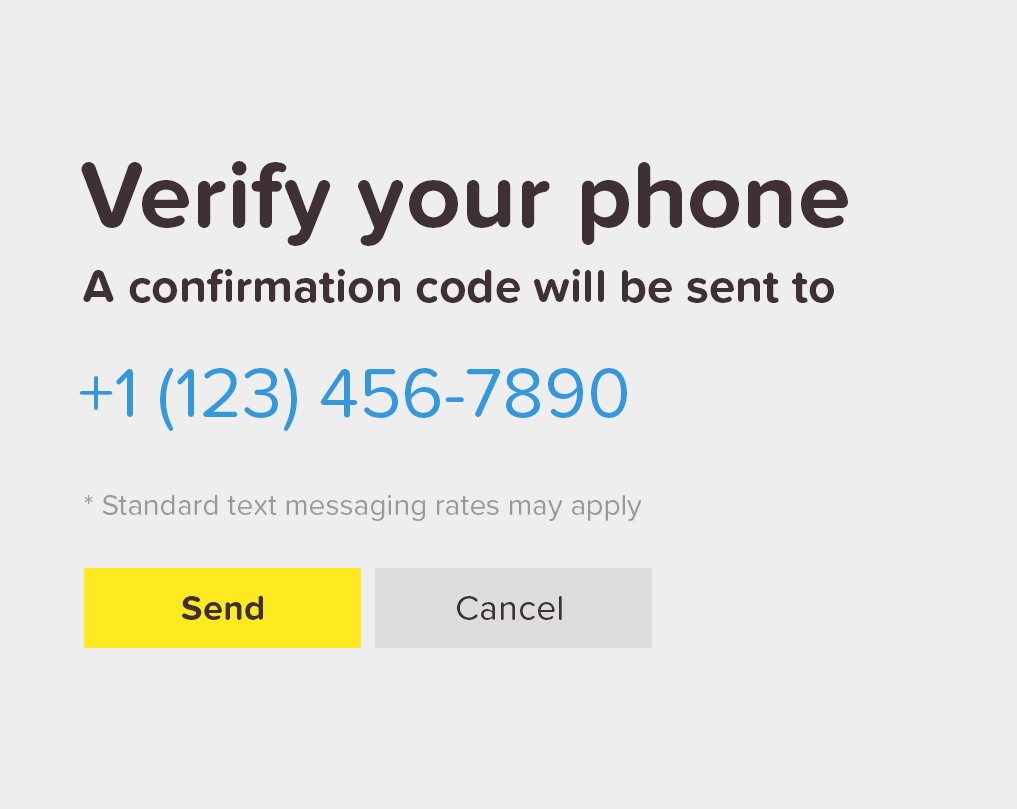
<style>
.page{position:relative;width:1017px;height:809px;background:#eeeeee}
.page>*{position:absolute;margin:0}
.t1{font:96px "ProximaNovaSoft-Bold";color:#3f3035}
.t2{font:48px "ProximaNovaSoft-Bold";color:#3f3035}
.t3{font:72px "ProximaNovaSoft-Regular";color:#3498db}
.t4{font:30px "ProximaNovaSoft-Regular";color:#999999}
.t5{font:36px "ProximaNovaSoft-Bold";color:#3f3035}
.t6{font:36px "ProximaNovaSoft-Regular";color:#3f3035}
</style>
<div class="page">
<p class="t1" style="left:81px;top:161px;width:767px;height:85px">Verify your phone</p>
<p class="t2" style="left:83px;top:269px;width:751px;height:34px">A confirmation code will be sent to</p>
<p class="t3" style="left:79px;top:368px;width:548px;height:63px">+1 (123) 456-7890</p>
<p class="t4" style="left:84px;top:494px;width:558px;height:27px">* Standard text messaging rates may apply</p>
<p class="t5" style="left:182px;top:595px;width:81px;height:25px">Send</p>
<p class="t6" style="left:457px;top:596px;width:105px;height:24px">Cancel</p>
</div>
